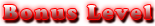
<style>
.page{position:relative;width:155px;height:26px}
.page>*{position:absolute;margin:0}
.t1{font:19.5px "CooperBlackStd";letter-spacing:0.125em}
</style>
<div class="page">
<p class="t1" style="left:3px;top:5px;width:149px;height:15px">Bonus Level</p>
</div>
